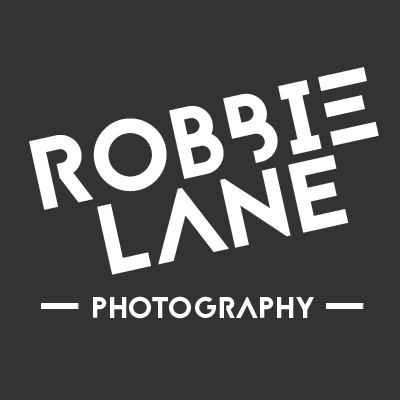
<style>
.page{position:relative;width:400px;height:400px;background:#333333}
.page>*{position:absolute;margin:0}
.t1{font:99.8px "Jaapokki-Regular";color:#ffffff}
.t2{font:99.8px "Jaapokkisubtract-Regular";color:#ffffff}
.t3{font:98.9px "Jaapokkisubtract-Regular";color:#ffffff}
.t4{font:98.9px "Jaapokkienchance-Regular";color:#ffffff}
.t5{font:30px "Jaapokkisubtract-Regular";color:#ffffff}
</style>
<div class="page">
<p class="t1" style="left:29px;top:67px;width:350px;height:143px;rotate:-12deg"><span class="t2">R</span>OB<span class="t2">B</span>I<span class="t2">E</span></p>
<p class="t3" style="left:97px;top:154px;width:252px;height:121px;rotate:-13deg">LAN<span class="t4">E</span></p>
<p class="t5" style="left:93px;top:296px;width:221px;height:23px">PHOTOGRAPHY</p>
</div>
